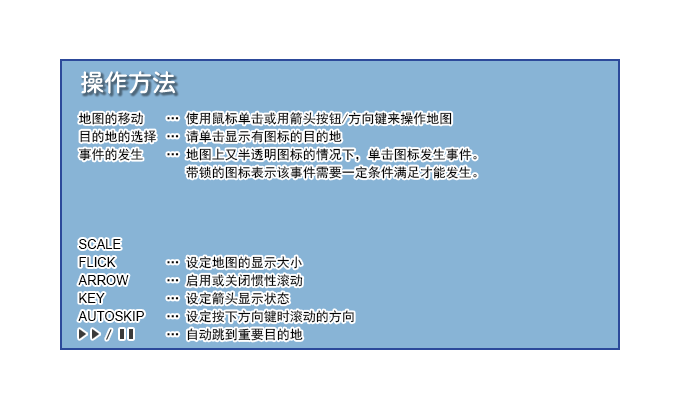
<style>
.page{position:relative;width:680px;height:410px;background:#ffffff}
.page>*{position:absolute;margin:0}
.t1{font:13px/18px "ArialMT";color:#000000}
.t2{font:13px/18px "SimHei";color:#000000}
</style>
<div class="page">
<p class="t1" style="left:78px;top:112px;width:78px;height:209px"><span class="t2">地图的移动<br>目的地的选择<br>事件的发生<br><br><br><br><br></span>SCALE<br>FLICK<br>ARROW<br>KEY<br>AUTOSKIP</p>
<p class="t2" style="left:167px;top:112px;width:310px;height:229px">… 使用鼠标单击或用箭头按钮/方向键来操作地图<br>… 请单击显示有图标的目的地<br>… 地图上又半透明图标的情况下，单击图标发生事件。<br>   带锁的图标表示该事件需要一定条件满足才能发生。<br><br><br><br><br>… 设定地图的显示大小<br>… 启用或关闭惯性滚动<br>… 设定箭头显示状态<br>… 设定按下方向键时滚动的方向<br>… 自动跳到重要目的地<br>… 开始或停止跳过信息</p>
</div>
